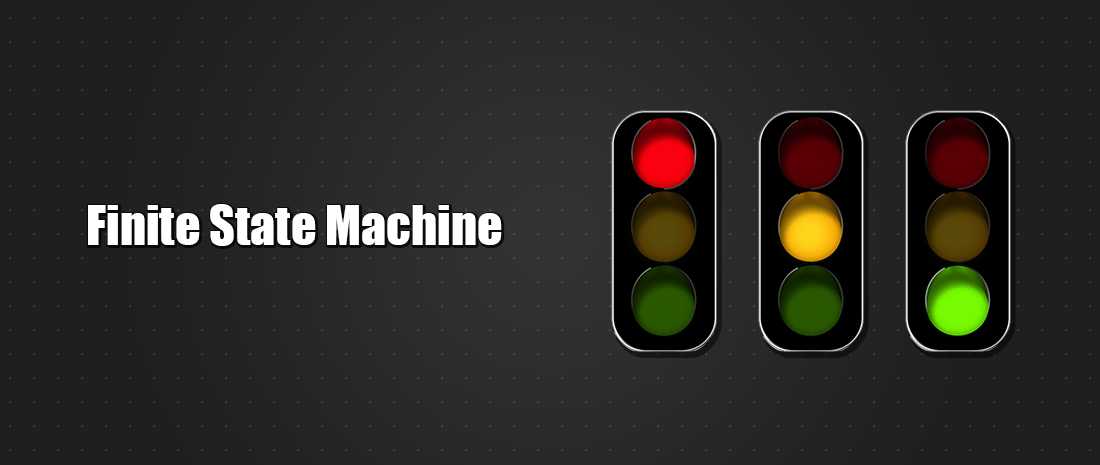
<style>
.page{position:relative;width:1100px;height:465px;background:#1f1f1f}
.page>*{position:absolute;margin:0}
.t1{font:50px "Impact";color:#ffffff}
</style>
<div class="page">
<p class="t1" style="left:88px;top:204px;width:414px;height:42px">Finite State Machine</p>
</div>
